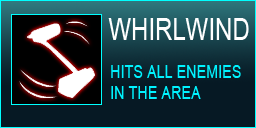
<style>
.page{position:relative;width:256px;height:128px;background:#061924}
.page>*{position:absolute;margin:0}
.t1{font:30px "ArialMT";color:#ffffff;scale:0.8 1}
.t2{font:18px "ArialMT";color:#00f3ff;scale:0.8 1}
</style>
<div class="page">
<p class="t1" style="left:108px;top:18px;width:141px;height:22px">WHIRLWIND</p>
<p class="t2" style="left:111px;top:65px;width:130px;height:34px">HITS ALL ENEMIES<br>IN THE AREA</p>
</div>
